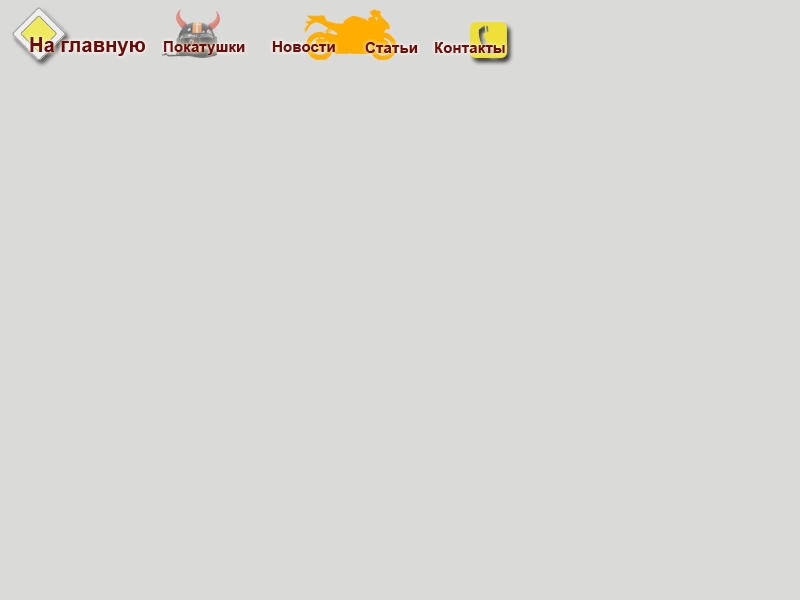
<style>
.page{position:relative;width:800px;height:600px;background:#dadad9}
.page>*{position:absolute;margin:0}
.t1{font:20.3px "Arial-BoldMT";color:#720909}
.t2{font:15.2px "Arial-BoldMT";color:#720909}
</style>
<div class="page">
<p class="t1" style="left:30px;top:37px;width:115px;height:19px">На главную</p>
<p class="t2" style="left:164px;top:41px;width:81px;height:14px">Покатушки</p>
<p class="t2" style="left:272px;top:41px;width:63px;height:11px">Новости</p>
<p class="t2" style="left:365px;top:42px;width:53px;height:11px">Статьи</p>
<p class="t2" style="left:435px;top:42px;width:70px;height:11px">Контакты</p>
</div>
